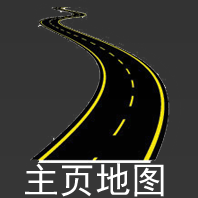
<style>
.page{position:relative;width:198px;height:198px}
.page>*{position:absolute;margin:0}
.t1{font:36px "SimHei";color:#ffffff}
</style>
<div class="page">
<p class="t1" style="left:25px;top:163px;width:139px;height:34px">主页地图</p>
</div>
